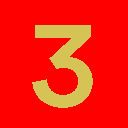
<style>
.page{position:relative;width:128px;height:128px;background:#ff0000}
.page>*{position:absolute;margin:0}
.t1{font:125px "CircularStd-Medium";color:#d6c356}
</style>
<div class="page">
<p class="t1" style="left:32px;top:25px;width:61px;height:83px">3</p>
</div>
